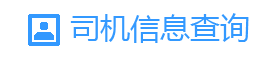
<style>
.page{position:relative;width:260px;height:60px;background:#ffffff}
.page>*{position:absolute;margin:0}
.t1{font:30px "MicrosoftYaHei";color:#3399ff}
</style>
<div class="page">
<p class="t1" style="left:70px;top:13px;width:179px;height:30px">司机信息查询</p>
</div>
